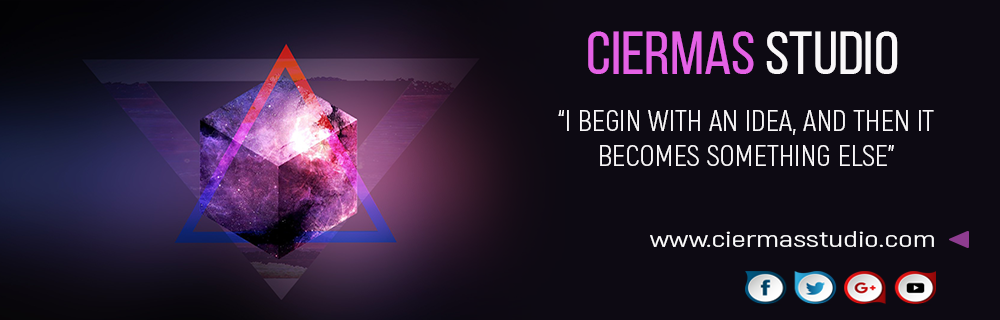
<style>
.page{position:relative;width:1000px;height:320px;background:#0d0a13}
.page>*{position:absolute;margin:0}
.t1{font:60.4px "BebasNeueRegular";color:#e561e6;scale:1.07 1}
.t2{font:60.4px "BebasNeueRegular";color:#f9f7f9;scale:1.07 1}
.t3{font:29.2px "Akrobat-Regular";color:#f9f7f9}
.t4{font:21.6px "Akrobat-Regular";color:#fcfcfd;scale:1.47 1}
</style>
<div class="page">
<p class="t1" style="left:588px;top:31px;width:310px;height:43px">Ciermas <span class="t2">studio</span></p>
<p class="t3" style="left:558px;top:110px;width:376px;height:56px;text-align:center">“I BEGIN WITH AN IDEA, AND THEN IT BECOMES SOMETHING ELSE”</p>
<p class="t4" style="left:650px;top:231px;width:284px;height:16px">www.ciermasstudio.com</p>
</div>
